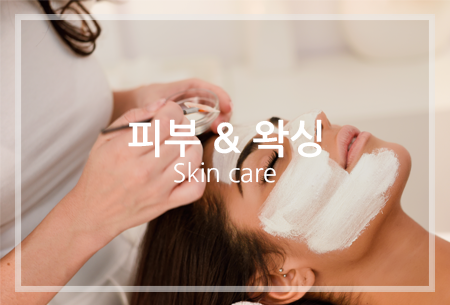
<style>
.page{position:relative;width:450px;height:305px}
.page>*{position:absolute;margin:0}
.t1{font:39.5px "NanumGothicBold";color:#ffffff}
.t2{font:25.3px "NanumGothic";color:#ffffff}
</style>
<div class="page">
<p class="t1" style="left:128px;top:119px;width:194px;height:39px">피부 &amp; 왁싱</p>
<p class="t2" style="left:174px;top:161px;width:102px;height:22px">Skin care</p>
</div>
